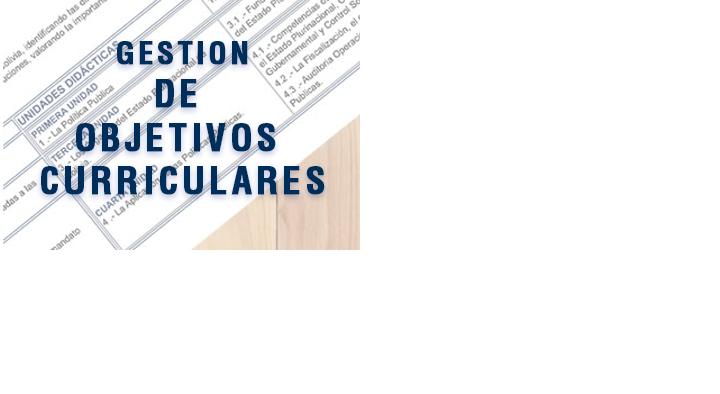
<style>
.page{position:relative;width:720px;height:394px;background:#ffffff}
.page>*{position:absolute;margin:0}
.t1{font:36px "Helvetica-Condensed-Bold";letter-spacing:0.1em;color:#002e5b;font-weight:bold}
.t2{font:30px "Helvetica-Condensed-Bold";letter-spacing:0.1em;color:#002e5b;font-weight:bold}
</style>
<div class="page">
<p class="t1" style="left:41px;top:41px;width:284px;height:154px;text-align:center"><span class="t2">GESTION<br></span>DE <br>OBJETIVOS <br>CURRICULARES</p>
</div>
